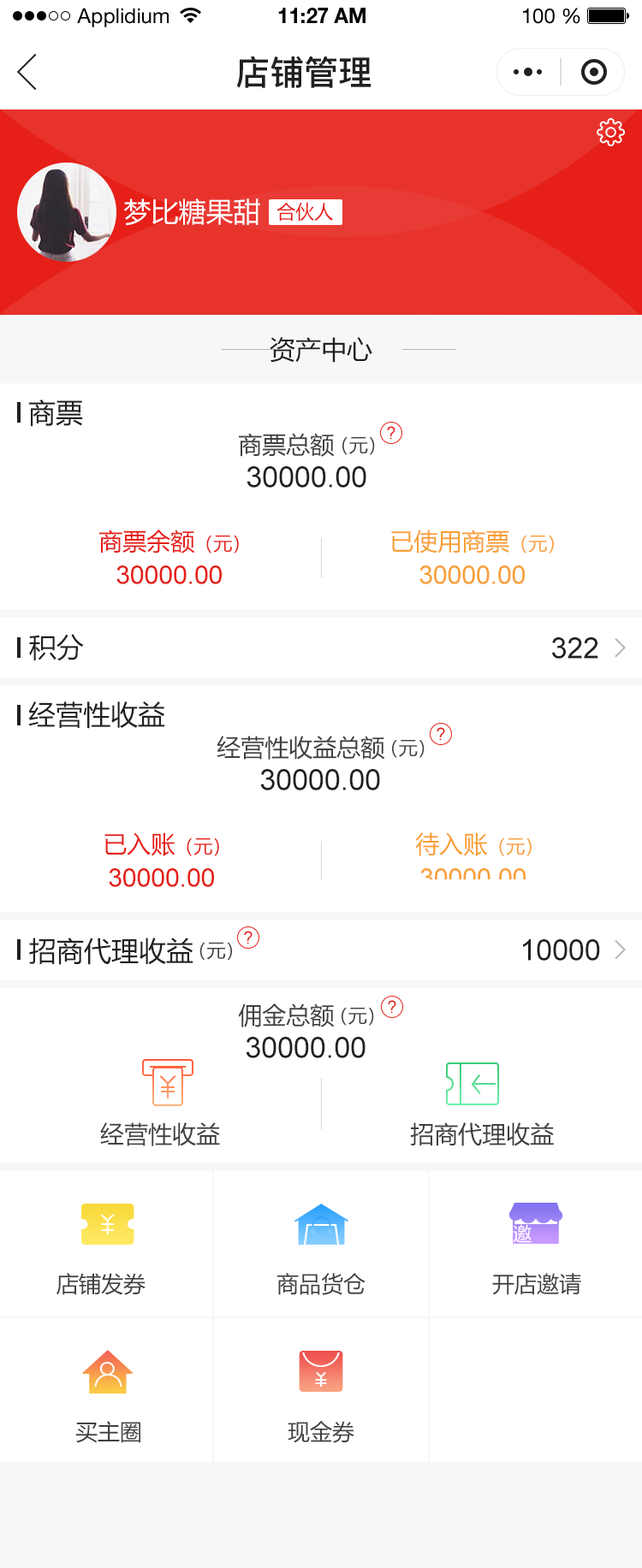
<style>
.page{position:relative;width:642px;height:1568px;background:#ffffff}
.page>*{position:absolute;margin:0}
.t1{font:20.5px "HelveticaNeueLTStd-Roman";color:#000000}
.t2{font:20.5px "HelveticaNeueLTStd-Bd";color:#000000}
.t3{font:34.2px "PingFang-SC-Bold";color:#202020;text-transform:uppercase}
.t4{font:27.4px "MicrosoftYaHei";color:#ffffff;text-transform:uppercase}
.t5{font:18.8px "MicrosoftYaHei";color:#e61f18;text-transform:uppercase}
.t6{font:25.7px "MicrosoftYaHei";color:#202020;text-transform:uppercase}
.t7{font:27.4px "MicrosoftYaHei";color:#202020;text-transform:uppercase}
.t8{font:24px "MicrosoftYaHei";color:#404040;text-transform:uppercase}
.t9{font:18.8px "MicrosoftYaHei";color:#404040;text-transform:uppercase}
.t10{font:17.1px "ArialMT";color:#e61f18;text-transform:uppercase}
.t11{font:29.1px "ArialMT";color:#202020;text-transform:uppercase}
.t12{font:24px "MicrosoftYaHei";color:#e61f18;text-transform:uppercase}
.t13{font:24px "MicrosoftYaHei";color:#f99f36;text-transform:uppercase}
.t14{font:18.8px "MicrosoftYaHei";color:#f99f36;text-transform:uppercase}
.t15{font:25.7px "ArialMT";color:#e61f18;text-transform:uppercase}
.t16{font:25.7px "ArialMT";color:#f99f36;text-transform:uppercase}
.t17{font:18.8px "MicrosoftYaHei";color:#ffffff;text-transform:uppercase}
.t18{font:22.2px "MicrosoftYaHei";color:#404040;text-transform:uppercase}
</style>
<div class="page">
<p class="t1" style="left:77px;top:8px;width:92px;height:19px">Applidium</p>
<p class="t2" style="left:278px;top:8px;width:87px;height:15px">11:27 AM</p>
<p class="t1" style="left:523px;top:8px;width:57px;height:16px">100 %</p>
<p class="t3" style="left:236px;top:56px;width:135px;height:32px">店铺管理</p>
<p class="t4" style="left:124px;top:198px;width:136px;height:28px">梦比糖果甜</p>
<p class="t5" style="left:276px;top:202px;width:57px;height:20px">合伙人</p>
<p class="t6" style="left:269px;top:337px;width:103px;height:26px">资产中心</p>
<p class="t7" style="left:28px;top:399px;width:55px;height:28px">商票</p>
<p class="t8" style="left:239px;top:433px;width:95px;height:24px">商票总额</p>
<p class="t9" style="left:342px;top:437px;width:33px;height:18px">（元）</p>
<p class="t10" style="left:387px;top:426px;width:8px;height:14px">?</p>
<p class="t11" style="left:246px;top:466px;width:120px;height:22px">30000.00</p>
<p class="t12" style="left:99px;top:530px;width:140px;height:23px">商票余额<span class="t5">（元）</span></p>
<p class="t13" style="left:391px;top:530px;width:162px;height:23px">已使用商票<span class="t14">（元）</span></p>
<p class="t15" style="left:116px;top:565px;width:106px;height:19px">30000.00</p>
<p class="t16" style="left:419px;top:565px;width:105px;height:19px">30000.00</p>
<p class="t7" style="left:29px;top:634px;width:55px;height:27px">积分</p>
<p class="t11" style="left:552px;top:637px;width:46px;height:22px">322</p>
<p class="t7" style="left:28px;top:701px;width:137px;height:28px">经营性收益</p>
<p class="t8" style="left:216px;top:736px;width:169px;height:24px">经营性收益总额</p>
<p class="t10" style="left:436px;top:727px;width:9px;height:14px">?</p>
<p class="t9" style="left:392px;top:740px;width:32px;height:18px">（元）</p>
<p class="t11" style="left:260px;top:769px;width:120px;height:21px">30000.00</p>
<p class="t12" style="left:104px;top:832px;width:115px;height:24px">已入账<span class="t5">（元）</span></p>
<p class="t13" style="left:415px;top:832px;width:116px;height:24px">待入账<span class="t14">（元）</span></p>
<p class="t15" style="left:109px;top:868px;width:105px;height:19px">30000.00</p>
<p class="t16" style="left:420px;top:868px;width:105px;height:11px">30000.00</p>
<p class="t7" style="left:29px;top:938px;width:164px;height:27px">招商代理收益</p>
<p class="t9" style="left:199px;top:942px;width:33px;height:19px">（元）</p>
<p class="t10" style="left:244px;top:931px;width:8px;height:13px">?</p>
<p class="t11" style="left:523px;top:939px;width:77px;height:22px">10000</p>
<p class="t10" style="left:388px;top:1000px;width:8px;height:14px">?</p>
<p class="t8" style="left:238px;top:1003px;width:96px;height:24px">佣金总额</p>
<p class="t9" style="left:341px;top:1008px;width:33px;height:18px">（元）</p>
<p class="t11" style="left:246px;top:1037px;width:119px;height:21px">30000.00</p>
<p class="t8" style="left:100px;top:1122px;width:120px;height:24px">经营性收益</p>
<p class="t8" style="left:410px;top:1122px;width:143px;height:24px">招商代理收益</p>
<p class="t17" style="left:512px;top:1224px;width:19px;height:19px">邀</p>
<p class="t18" style="left:56px;top:1273px;width:89px;height:22px">店铺发券</p>
<p class="t18" style="left:276px;top:1273px;width:89px;height:22px">商品货仓</p>
<p class="t18" style="left:492px;top:1273px;width:89px;height:22px">开店邀请</p>
<p class="t18" style="left:75px;top:1421px;width:65px;height:22px">买主圈</p>
<p class="t18" style="left:287px;top:1421px;width:67px;height:22px">现金券</p>
</div>
